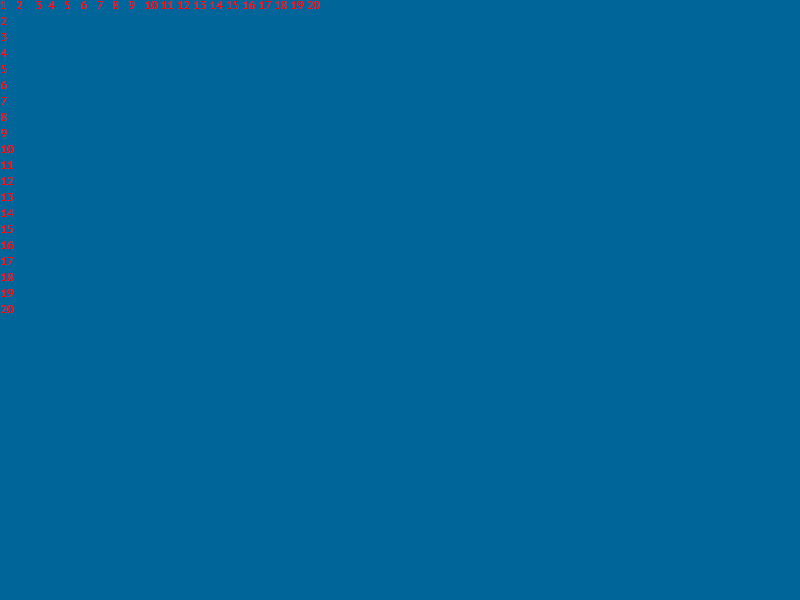
<style>
.page{position:relative;width:800px;height:600px;background:#006699}
.page>*{position:absolute;margin:0}
.t1{font:12px "PTSans-Regular";color:#ff0000}
.t2{font:12px/16px "PTSans-Regular";color:#ff0000}
</style>
<div class="page">
<p class="t1" style="left:0px;top:1px;width:320px;height:8px">1   2    3  4   5   6   7   8   9   10 11 12 13 14 15 16 17 18 19 20</p>
<p class="t2" style="left:0px;top:17px;width:14px;height:296px">2<br>3<br>4<br>5<br>6<br>7<br>8<br>9<br>10<br>11<br>12<br>13<br>14<br>15<br>16<br>17<br>18<br>19<br>20</p>
</div>
